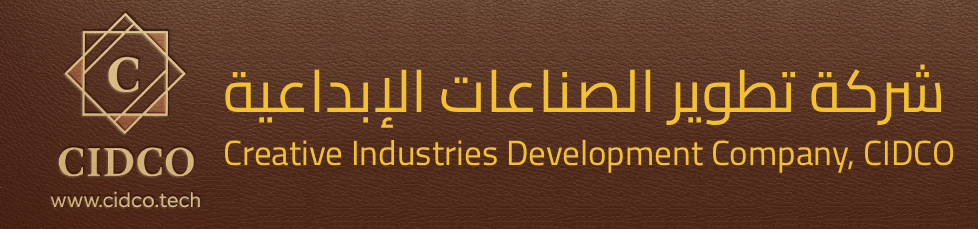
<style>
.page{position:relative;width:978px;height:229px}
.page>*{position:absolute;margin:0}
.t1{font:59px "Cairo-Regular";color:#f3c02f}
.t2{font:35px "Cairo-Regular";color:#f3c02f}
</style>
<div class="page">
<p class="t1" style="left:225px;top:64px;width:717px;height:64px">شركة تطوير الصناعات الإبداعية</p>
<p class="t2" style="left:225px;top:139px;width:729px;height:34px">Creative Industries Development Company, CIDCO</p>
</div>
